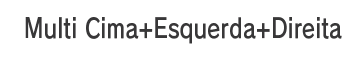
<style>
.page{position:relative;width:342px;height:60px;background:#ffffff}
.page>*{position:absolute;margin:0}
.t1{font:26.7px "RodinPro-DB";letter-spacing:0.008em;color:#383738;scale:0.81 1}
</style>
<div class="page">
<p class="t1" style="left:25px;top:17px;width:317px;height:27px">Multi Cima+Esquerda+Direita</p>
</div>
